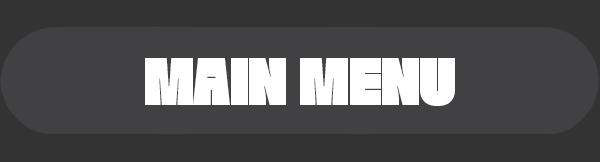
<style>
.page{position:relative;width:600px;height:162px;background:#414042}
.page>*{position:absolute;margin:0}
.t1{font:63px "FactionPersonal-Black";color:#ffffff}
</style>
<div class="page">
<p class="t1" style="left:145px;top:58px;width:310px;height:48px">MAIN MENU</p>
</div>
